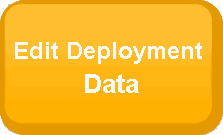
<style>
.page{position:relative;width:223px;height:135px;background:#ffbe2e}
.page>*{position:absolute;margin:0}
.t1{font:24px "Arial-BoldMT";color:#fbfafa}
.t2{font:26px "Arial-BoldMT";color:#fbfafa}
</style>
<div class="page">
<p class="t1" style="left:15px;top:42px;width:187px;height:22px">Edit Deployment</p>
<p class="t2" style="left:85px;top:74px;width:54px;height:19px">Data</p>
</div>
